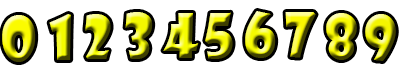
<style>
.page{position:relative;width:400px;height:80px;background:#ffffff}
.page>*{position:absolute;margin:0}
.t1{font:60px "ShowcardGothic-Reg"}
</style>
<div class="page">
<p class="t1" style="left:2px;top:15px;width:34px;height:47px">0</p>
<p class="t1" style="left:49px;top:14px;width:22px;height:46px">1</p>
<p class="t1" style="left:85px;top:14px;width:26px;height:45px">2</p>
<p class="t1" style="left:125px;top:12px;width:28px;height:47px">3</p>
<p class="t1" style="left:163px;top:13px;width:36px;height:45px">4</p>
<p class="t1" style="left:205px;top:12px;width:28px;height:47px">5</p>
<p class="t1" style="left:245px;top:11px;width:31px;height:47px">6</p>
<p class="t1" style="left:285px;top:12px;width:31px;height:46px">7</p>
<p class="t1" style="left:326px;top:13px;width:31px;height:47px">8</p>
<p class="t1" style="left:365px;top:14px;width:31px;height:47px">9</p>
</div>
